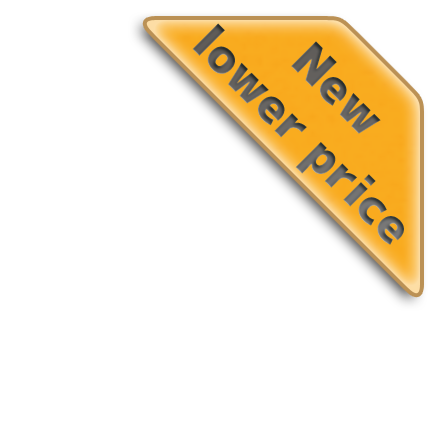
<style>
.page{position:relative;width:440px;height:440px;background:#ffffff}
.page>*{position:absolute;margin:0}
.t1{font:48px "mplus-1p-black";color:#605e5c}
</style>
<div class="page">
<p class="t1" style="left:192px;top:23px;width:212px;height:222px;text-align:center;rotate:45deg">New <br>lower price</p>
</div>
